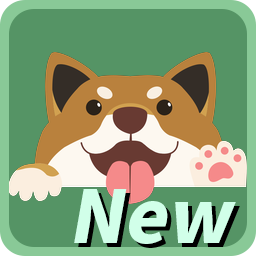
<style>
.page{position:relative;width:256px;height:256px;background:#559465}
.page>*{position:absolute;margin:0}
.t1{font:72px "SourceHanSansSC-Heavy";color:#d1ffe9;font-style:italic}
</style>
<div class="page">
<p class="t1" style="left:74px;top:189px;width:162px;height:55px">New</p>
</div>
